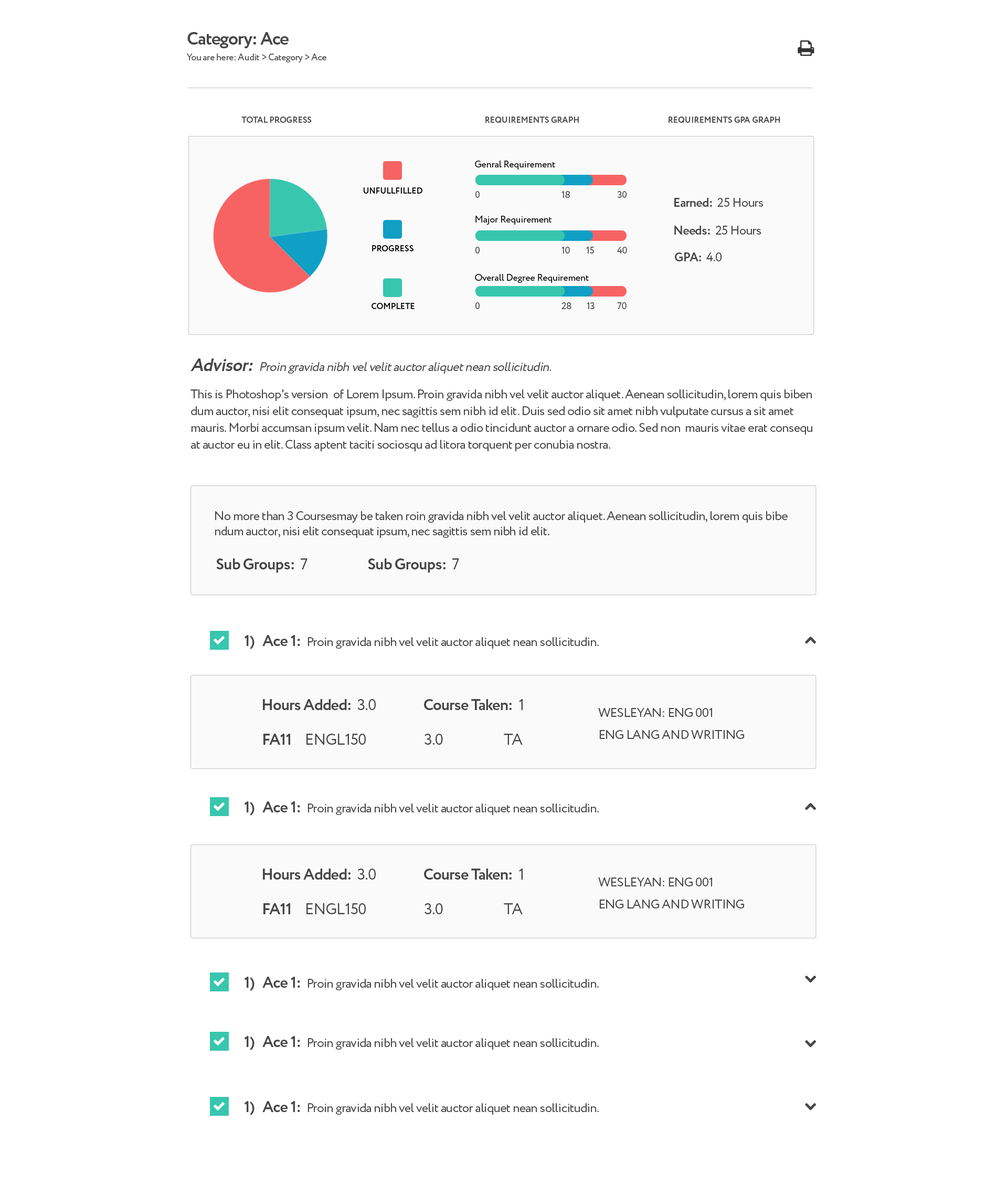
<style>
.page{position:relative;width:1007px;height:1184px;background:#ffffff}
.page>*{position:absolute;margin:0}
.t1{font:17.8px "Circe-Bold";letter-spacing:-0.03em;color:#464646}
.t2{font:9.4px "Circe-Regular";letter-spacing:-0.03em;color:#464646}
.t3{font:8.4px "Circe-Bold";letter-spacing:-0.01em;color:#464646}
.t4{font:9.4px "Circe-Regular";letter-spacing:-0.01em;color:#000000}
.t5{font:8.4px "Circe-Bold";letter-spacing:-0.01em;color:#000000}
.t6{font:12.6px "Circe-Regular";letter-spacing:-0.03em;color:#464646}
.t7{font:12.6px "Circe-Bold";letter-spacing:-0.03em;color:#464646}
.t8{font:12.6px "Circe-Regular";letter-spacing:-0.03em;color:#464646;font-style:italic}
.t9{font:17.8px "Circe-Bold";letter-spacing:-0.03em;color:#464646;font-style:italic}
.t10{font:12.6px/16.8px "Circe-Regular";letter-spacing:-0.03em;color:#464646}
.t11{font:15.7px "Circe-Bold";letter-spacing:-0.03em;color:#464646}
.t12{font:15.7px "Circe-Regular";letter-spacing:-0.03em;color:#464646}
.t13{font:12.6px/22px "Circe-Regular";letter-spacing:-0.03em;color:#464646}
</style>
<div class="page">
<p class="t1" style="left:187px;top:32px;width:102px;height:16px">Category: Ace</p>
<p class="t2" style="left:187px;top:54px;width:139px;height:8px">You are here: Audit &gt; Category &gt; Ace</p>
<p class="t3" style="left:241px;top:117px;width:71px;height:6px">TOTAL PROGRESS</p>
<p class="t3" style="left:485px;top:117px;width:94px;height:6px">REQUIREMENTS GRAPH</p>
<p class="t3" style="left:669px;top:117px;width:111px;height:6px">REQUIREMENTS GPA GRAPH</p>
<p class="t4" style="left:475px;top:161px;width:80px;height:9px">Genral Requirement</p>
<p class="t5" style="left:363px;top:187px;width:59px;height:7px">UNFULLFILLED</p>
<p class="t2" style="left:475px;top:191px;width:5px;height:7px">0</p>
<p class="t2" style="left:562px;top:191px;width:8px;height:7px">18</p>
<p class="t2" style="left:617px;top:191px;width:10px;height:7px">30</p>
<p class="t6" style="left:674px;top:198px;width:90px;height:9px"><span class="t7">Earned:  </span>25 Hours</p>
<p class="t4" style="left:475px;top:216px;width:77px;height:9px">Major Requirement</p>
<p class="t6" style="left:674px;top:226px;width:88px;height:9px"><span class="t7">Needs:  </span>25 Hours</p>
<p class="t5" style="left:372px;top:245px;width:42px;height:6px">PROGRESS</p>
<p class="t2" style="left:475px;top:247px;width:5px;height:6px">0</p>
<p class="t2" style="left:562px;top:247px;width:8px;height:6px">10</p>
<p class="t2" style="left:586px;top:247px;width:8px;height:6px">15</p>
<p class="t2" style="left:617px;top:247px;width:10px;height:6px">40</p>
<p class="t7" style="left:675px;top:252px;width:47px;height:9px">GPA:  <span class="t6">4.0</span></p>
<p class="t4" style="left:475px;top:274px;width:114px;height:9px">Overall Degree Requirement</p>
<p class="t5" style="left:372px;top:303px;width:43px;height:6px">COMPLETE</p>
<p class="t2" style="left:475px;top:302px;width:5px;height:7px">0</p>
<p class="t2" style="left:562px;top:302px;width:10px;height:7px">28</p>
<p class="t2" style="left:587px;top:302px;width:8px;height:7px">13</p>
<p class="t2" style="left:617px;top:302px;width:10px;height:7px">70</p>
<p class="t8" style="left:191px;top:358px;width:361px;height:16px"><span class="t9">Advisor:  </span>Proin gravida nibh vel velit auctor aliquet nean sollicitudin.</p>
<p class="t10" style="left:191px;top:389px;width:621px;height:62px">This is Photoshop's version  of Lorem Ipsum. Proin gravida nibh vel velit auctor aliquet. Aenean sollicitudin, lorem quis biben<br>dum auctor, nisi elit consequat ipsum, nec sagittis sem nibh id elit. Duis sed odio sit amet nibh vulputate cursus a sit amet<br>mauris. Morbi accumsan ipsum velit. Nam nec tellus a odio tincidunt auctor a ornare odio. Sed non  mauris vitae erat consequ<br>at auctor eu in elit. Class aptent taciti sociosqu ad litora torquent per conubia nostra.</p>
<p class="t6" style="left:215px;top:511px;width:573px;height:27px">No more than 3 Coursesmay be taken roin gravida nibh vel velit auctor aliquet. Aenean sollicitudin, lorem quis bibe<br>ndum auctor, nisi elit consequat ipsum, nec sagittis sem nibh id elit.</p>
<p class="t11" style="left:216px;top:558px;width:92px;height:15px">Sub Groups:  <span class="t12">7</span></p>
<p class="t11" style="left:368px;top:558px;width:91px;height:15px">Sub Groups:  <span class="t12">7</span></p>
<p class="t6" style="left:244px;top:635px;width:355px;height:14px"><span class="t11">1)   Ace 1:  </span>Proin gravida nibh vel velit auctor aliquet nean sollicitudin.</p>
<p class="t11" style="left:263px;top:699px;width:113px;height:11px">Hours Added:  <span class="t12">3.0</span></p>
<p class="t11" style="left:424px;top:699px;width:99px;height:11px">Course Taken:  <span class="t12">1</span></p>
<p class="t13" style="left:598px;top:708px;width:146px;height:31px">WESLEYAN: ENG 001<br>ENG LANG AND WRITING</p>
<p class="t11" style="left:263px;top:734px;width:27px;height:11px">FA11</p>
<p class="t12" style="left:306px;top:734px;width:60px;height:11px">ENGL150</p>
<p class="t12" style="left:425px;top:734px;width:18px;height:11px">3.0</p>
<p class="t12" style="left:504px;top:734px;width:19px;height:11px">TA</p>
<p class="t6" style="left:244px;top:801px;width:355px;height:15px"><span class="t11">1)   Ace 1:  </span>Proin gravida nibh vel velit auctor aliquet nean sollicitudin.</p>
<p class="t11" style="left:263px;top:869px;width:113px;height:11px">Hours Added:  <span class="t12">3.0</span></p>
<p class="t11" style="left:424px;top:869px;width:99px;height:11px">Course Taken:  <span class="t12">1</span></p>
<p class="t13" style="left:598px;top:877px;width:146px;height:31px">WESLEYAN: ENG 001<br>ENG LANG AND WRITING</p>
<p class="t11" style="left:263px;top:903px;width:27px;height:11px">FA11</p>
<p class="t12" style="left:306px;top:903px;width:60px;height:11px">ENGL150</p>
<p class="t12" style="left:425px;top:903px;width:18px;height:11px">3.0</p>
<p class="t12" style="left:504px;top:903px;width:19px;height:11px">TA</p>
<p class="t6" style="left:244px;top:977px;width:355px;height:14px"><span class="t11">1)   Ace 1:  </span>Proin gravida nibh vel velit auctor aliquet nean sollicitudin.</p>
<p class="t6" style="left:244px;top:1036px;width:355px;height:14px"><span class="t11">1)   Ace 1:  </span>Proin gravida nibh vel velit auctor aliquet nean sollicitudin.</p>
<p class="t6" style="left:244px;top:1101px;width:355px;height:14px"><span class="t11">1)   Ace 1:  </span>Proin gravida nibh vel velit auctor aliquet nean sollicitudin.</p>
</div>
